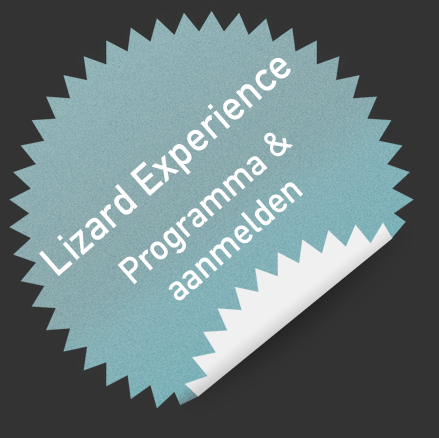
<style>
.page{position:relative;width:439px;height:438px;background:#333333}
.page>*{position:absolute;margin:0}
.t1{font:42px "DINAlternate-Bold";color:#ffffff}
.t2{font:36px "DINAlternate-Bold";color:#ffffff}
</style>
<div class="page">
<p class="t1" style="left:39px;top:58px;width:252px;height:218px;rotate:-41deg">Lizard Experience</p>
<p class="t2" style="left:117px;top:132px;width:186px;height:169px;text-align:center;rotate:-41deg">Programma &amp; <br>aanmelden</p>
</div>
